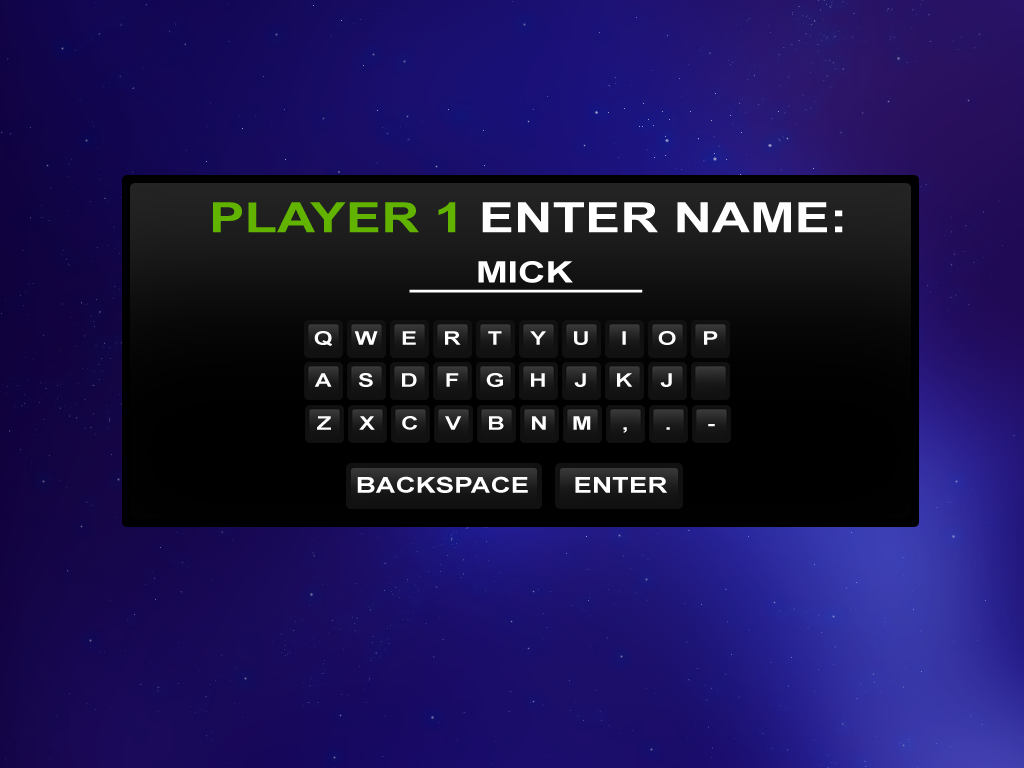
<style>
.page{position:relative;width:1024px;height:768px}
.page>*{position:absolute;margin:0}
.t1{font:41.8px "Arial-BoldMT";color:#ffffff;scale:1.27 1}
.t2{font:41.8px "Arial-BoldMT";color:#61b300;scale:1.27 1}
.t3{font:29.8px "Arial-BoldMT";color:#ffffff;scale:1.27 1}
.t4{font:18.8px "Arial-BoldMT";color:#ffffff;scale:1.27 1}
.t5{font:21.8px "Arial-BoldMT";color:#ffffff;scale:1.27 1}
</style>
<div class="page">
<p class="t1" style="left:213px;top:202px;width:630px;height:31px"><span class="t2">PLAYER 1</span> ENTER NAME:</p>
<p class="t3" style="left:478px;top:261px;width:95px;height:22px">MICK</p>
<p class="t3" style="left:409px;top:289px;width:234px;height:4px">___________</p>
<p class="t4" style="left:314px;top:331px;width:19px;height:15px">Q</p>
<p class="t4" style="left:354px;top:331px;width:24px;height:14px">W</p>
<p class="t4" style="left:402px;top:331px;width:14px;height:14px">E</p>
<p class="t4" style="left:445px;top:331px;width:16px;height:14px">R</p>
<p class="t4" style="left:488px;top:331px;width:14px;height:14px">T</p>
<p class="t4" style="left:530px;top:331px;width:16px;height:14px">Y</p>
<p class="t4" style="left:574px;top:331px;width:14px;height:14px">U</p>
<p class="t4" style="left:622px;top:331px;width:4px;height:14px">I</p>
<p class="t4" style="left:658px;top:331px;width:18px;height:14px">O</p>
<p class="t4" style="left:704px;top:331px;width:14px;height:14px">P</p>
<p class="t4" style="left:314px;top:373px;width:18px;height:14px">A</p>
<p class="t4" style="left:358px;top:373px;width:15px;height:14px">S</p>
<p class="t4" style="left:402px;top:373px;width:15px;height:14px">D</p>
<p class="t4" style="left:446px;top:373px;width:13px;height:14px">F</p>
<p class="t4" style="left:486px;top:373px;width:17px;height:14px">G</p>
<p class="t4" style="left:531px;top:373px;width:14px;height:14px">H</p>
<p class="t4" style="left:574px;top:373px;width:12px;height:14px">J</p>
<p class="t4" style="left:617px;top:373px;width:16px;height:14px">K</p>
<p class="t4" style="left:660px;top:373px;width:12px;height:14px">J</p>
<p class="t4" style="left:317px;top:416px;width:14px;height:14px">Z</p>
<p class="t4" style="left:359px;top:416px;width:16px;height:14px">X</p>
<p class="t4" style="left:402px;top:416px;width:16px;height:14px">C</p>
<p class="t4" style="left:445px;top:416px;width:17px;height:14px">V</p>
<p class="t4" style="left:489px;top:416px;width:15px;height:14px">B</p>
<p class="t4" style="left:532px;top:416px;width:14px;height:14px">N</p>
<p class="t4" style="left:573px;top:416px;width:18px;height:14px">M</p>
<p class="t4" style="left:708px;top:424px;width:7px;height:3px">-</p>
<p class="t4" style="left:623px;top:427px;width:4px;height:6px">,</p>
<p class="t4" style="left:666px;top:427px;width:4px;height:3px">.</p>
<p class="t5" style="left:357px;top:476px;width:171px;height:17px">BACKSPACE</p>
<p class="t5" style="left:575px;top:477px;width:93px;height:16px">ENTER</p>
</div>
